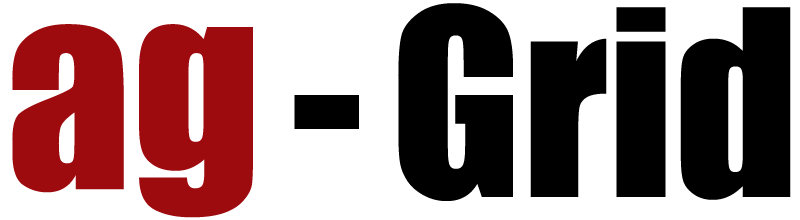
<style>
.page{position:relative;width:800px;height:220px;background:#ffffff}
.page>*{position:absolute;margin:0}
.t1{font:240px "Impact";color:#000000}
.t2{font:250px "Impact";color:#9e0b0f}
.t3{font:250px "Impact";color:#000000}
</style>
<div class="page">
<p class="t1" style="left:398px;top:3px;width:393px;height:198px">Grid</p>
<p class="t2" style="left:12px;top:24px;width:241px;height:194px">ag</p>
<p class="t3" style="left:294px;top:95px;width:65px;height:34px">-</p>
</div>
